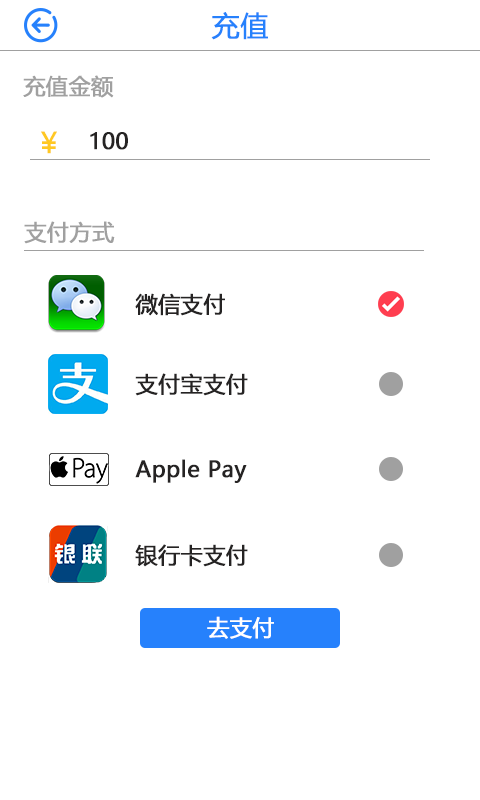
<style>
.page{position:relative;width:480px;height:800px;background:#ffffff}
.page>*{position:absolute;margin:0}
.t1{font:28px "MicrosoftYaHei";color:#2681fc;font-weight:bold}
.t2{font:22px "MicrosoftYaHei";color:#a0a0a0;font-weight:bold}
.t3{font:28px "MicrosoftYaHei";color:#ffc822;font-weight:bold}
.t4{font:22px "MicrosoftYaHei";color:#252323;font-weight:bold}
.t5{font:22px "MicrosoftYaHei";color:#ffffff;font-weight:bold}
</style>
<div class="page">
<p class="t1" style="left:211px;top:12px;width:57px;height:28px">充值</p>
<p class="t2" style="left:23px;top:75px;width:91px;height:23px">充值金额</p>
<p class="t3" style="left:41px;top:131px;width:16px;height:23px">￥</p>
<p class="t4" style="left:90px;top:132px;width:38px;height:18px">100</p>
<p class="t2" style="left:24px;top:221px;width:91px;height:23px">支付方式</p>
<p class="t4" style="left:135px;top:293px;width:90px;height:23px">微信支付</p>
<p class="t4" style="left:135px;top:373px;width:113px;height:23px">支付宝支付</p>
<p class="t4" style="left:135px;top:459px;width:112px;height:24px">Apple Pay</p>
<p class="t4" style="left:135px;top:544px;width:113px;height:23px">银行卡支付</p>
<p class="t5" style="left:207px;top:616px;width:67px;height:23px">去支付</p>
</div>
